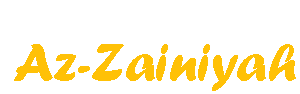
<style>
.page{position:relative;width:300px;height:94px;background:#ffffff}
.page>*{position:absolute;margin:0}
.t1{font:55px "ForteMT";color:#ffc107}
</style>
<div class="page">
<p class="t1" style="left:14px;top:44px;width:282px;height:47px">Az-Zainiyah</p>
</div>
